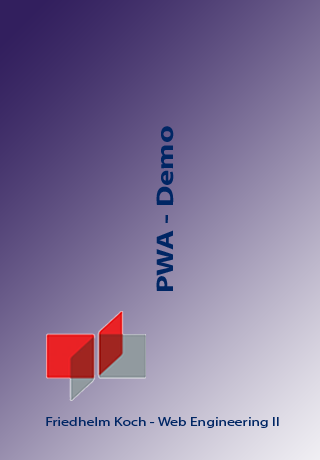
<style>
.page{position:relative;width:320px;height:460px}
.page>*{position:absolute;margin:0}
.t1{font:24.2px "MyriadPro-Bold";color:#002664;scale:1.27 1}
.t2{font:12.2px "MyriadPro-Regular";color:#002664;scale:1.27 1}
</style>
<div class="page">
<p class="t1" style="left:156px;top:126px;width:18px;height:165px;rotate:-90deg">PWA - Demo</p>
<p class="t2" style="left:46px;top:417px;width:233px;height:11px">Friedhelm Koch - Web Engineering II</p>
</div>
